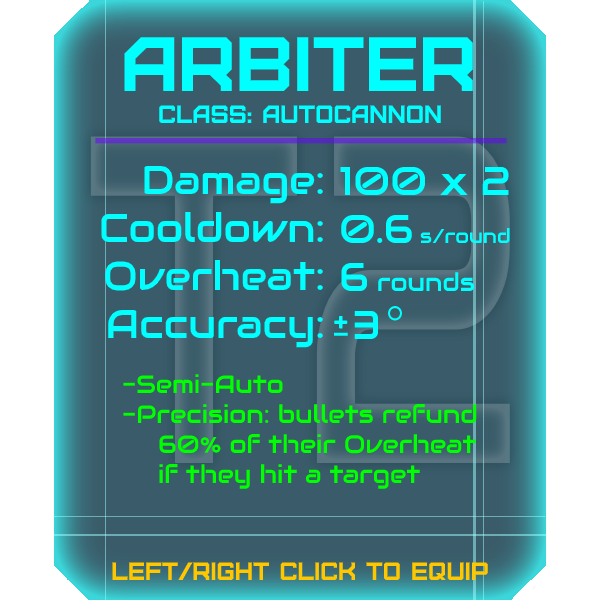
<style>
.page{position:relative;width:600px;height:600px;background:#3a5c6a}
.page>*{position:absolute;margin:0}
.t1{font:76.8px "Furore";color:#00ffff}
.t2{font:25px "Furore";color:#00ffff}
.t3{font:40px "Audiowide-Regular";color:#00ffff}
.t4{font:20px "Audiowide-Regular";color:#00ffff}
.t5{font:25px "Audiowide-Regular";color:#00ffff}
.t6{font:25px "Audiowide-Regular";color:#00ff00}
.t7{font:25px "Furore";color:#ffc700}
</style>
<div class="page">
<p class="t1" style="left:124px;top:37px;width:349px;height:54px">Arbiter</p>
<p class="t2" style="left:159px;top:105px;width:282px;height:18px">Class: autocannon</p>
<p class="t3" style="left:101px;top:165px;width:222px;height:183px;text-align:right">Damage:<br>Cooldown:<br>Overheat:<br>Accuracy:</p>
<p class="t3" style="left:340px;top:166px;width:170px;height:173px">100 x 2<br>0.6 <span class="t4">s/round<br></span>6 <span class="t5">rounds<br> </span>3</p>
<p class="t6" style="left:123px;top:374px;width:354px;height:115px"><span class="t3"><br><br><br><br><br></span>-Semi-Auto<br>-Precision: bullets refund<br> 60% of their Overheat<br> if they hit a target</p>
<p class="t7" style="left:112px;top:562px;width:376px;height:18px">left/right click to equip</p>
</div>
